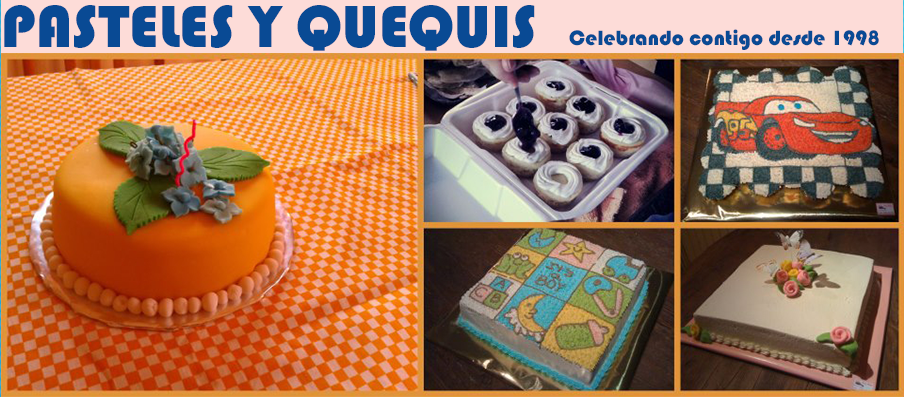
<style>
.page{position:relative;width:904px;height:397px}
.page>*{position:absolute;margin:0}
.t1{font:61.5px "Bauhaus93";color:#094a94}
.t2{font:21.6px "Bauhaus93";color:#094a94}
</style>
<div class="page">
<p class="t1" style="left:4px;top:5px;width:531px;height:46px">PASTELES Y QUEQUIS</p>
<p class="t2" style="left:569px;top:29px;width:310px;height:21px">Celebrando contigo desde 1998</p>
</div>
